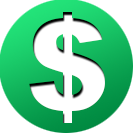
<style>
.page{position:relative;width:133px;height:133px;background:#ffffff}
.page>*{position:absolute;margin:0}
.t1{font:125px "Arial-Black";color:#ffffff}
</style>
<div class="page">
<p class="t1" style="left:29px;top:12px;width:76px;height:111px">$</p>
</div>
